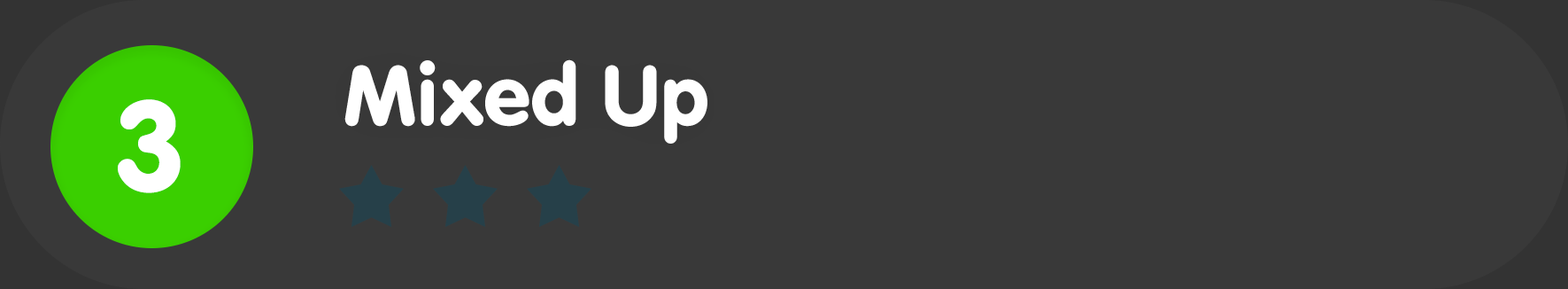
<style>
.page{position:relative;width:1568px;height:289px;background:#393939}
.page>*{position:absolute;margin:0}
.t1{font:88.5px "VAGRundschriftD";color:#ffffff}
.t2{font:132.8px "VAGRundschriftD";color:#ffffff}
</style>
<div class="page">
<p class="t1" style="left:344px;top:59px;width:363px;height:84px">Mixed Up</p>
<p class="t2" style="left:118px;top:99px;width:63px;height:94px">3</p>
</div>
